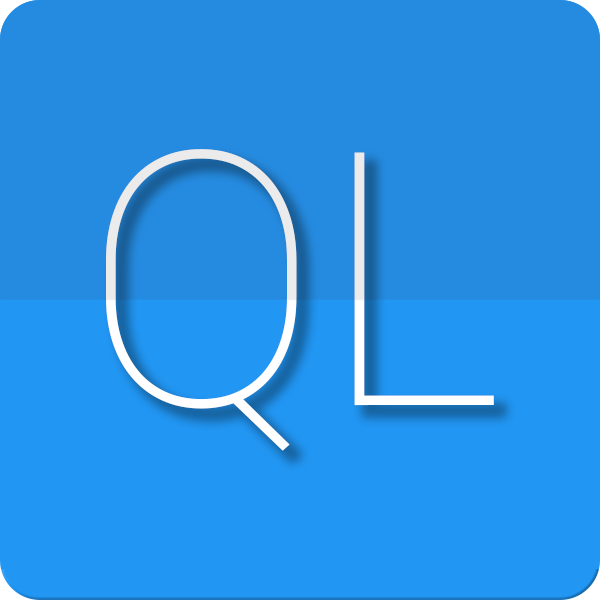
<style>
.page{position:relative;width:600px;height:600px;background:#258be0}
.page>*{position:absolute;margin:0}
.t1{font:355px "Roboto-Thin";color:#ffffff}
</style>
<div class="page">
<p class="t1" style="left:106px;top:149px;width:388px;height:302px">QL</p>
<p class="t1" style="left:106px;top:149px;width:388px;height:302px">QL</p>
</div>
